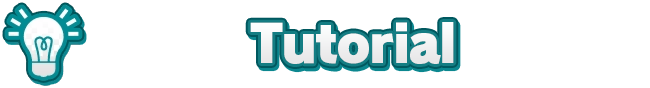
<style>
.page{position:relative;width:650px;height:88px;background:#ffffff}
.page>*{position:absolute;margin:0}
.t1{font:52px "RodinPro-UB";letter-spacing:-0.041em;color:#f1f1f2}
</style>
<div class="page">
<p class="t1" style="left:250px;top:22px;width:204px;height:42px">Tutorial</p>
</div>
